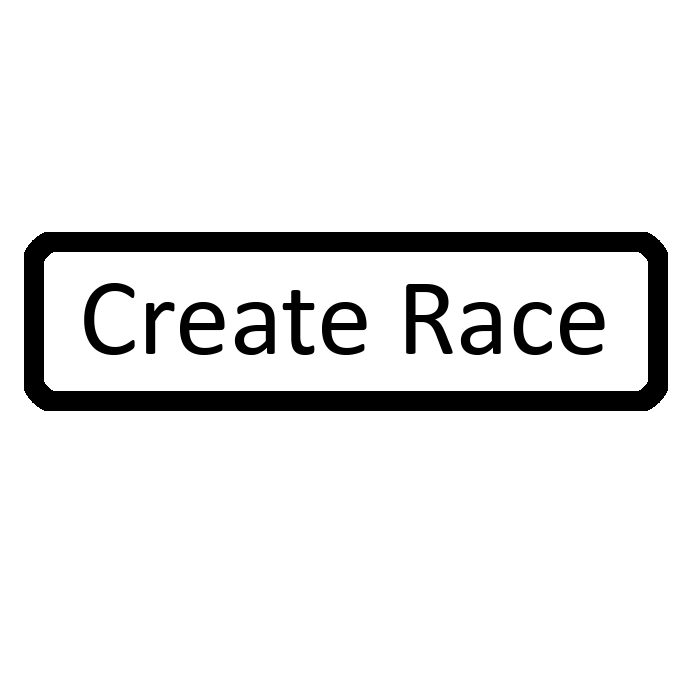
<style>
.page{position:relative;width:700px;height:700px;background:#ffffff}
.page>*{position:absolute;margin:0}
.t1{font:110px "Calibri";color:#000000}
</style>
<div class="page">
<p class="t1" style="left:84px;top:283px;width:521px;height:72px">Create Race</p>
</div>
